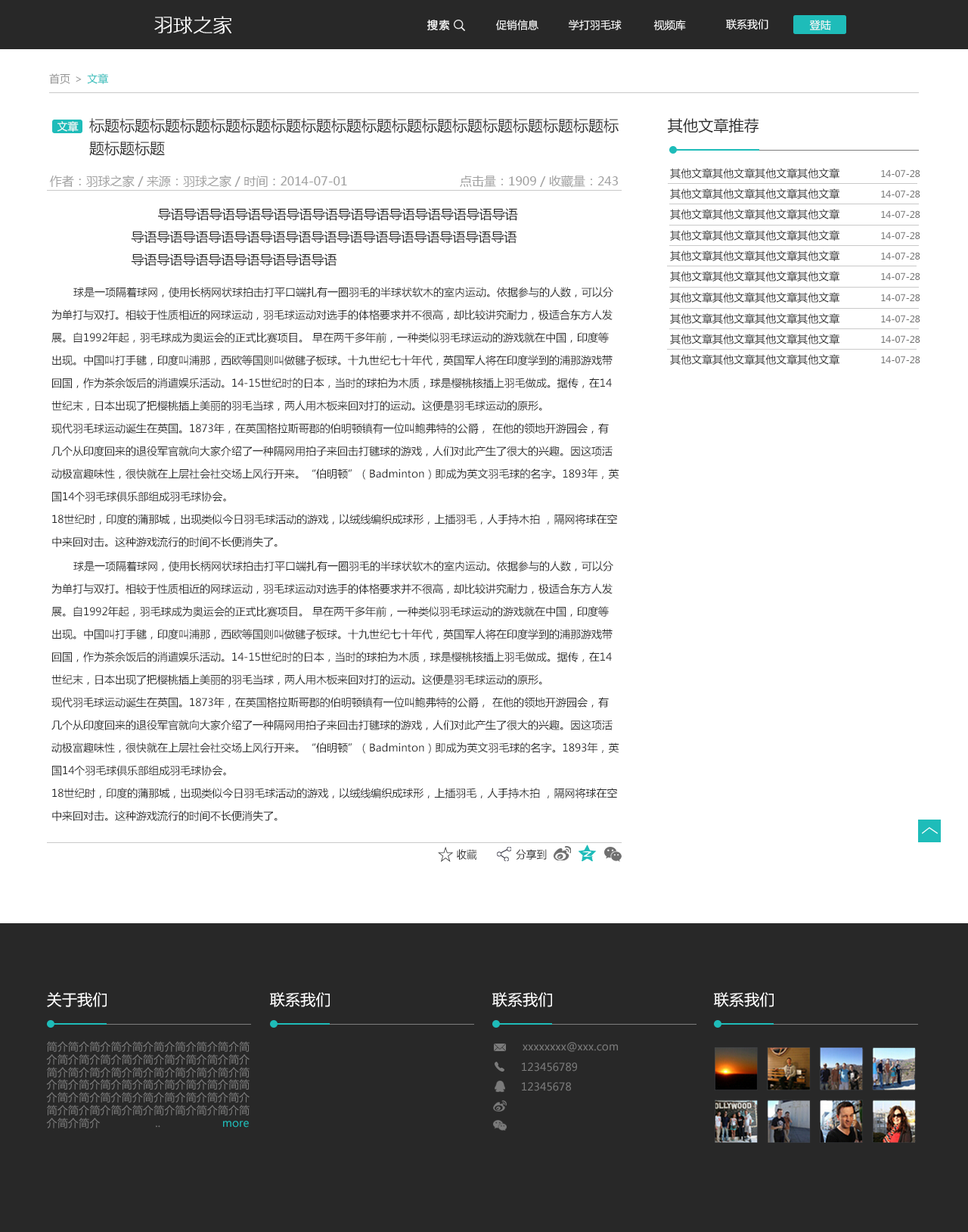
<style>
.page{position:relative;width:968px;height:1232px;background:#ffffff}
.page>*{position:absolute;margin:0}
.t1{font:18.9px "huxiaobo-meixin";color:#ffffff;font-weight:bold}
.t2{font:10.6px "MicrosoftYaHei";letter-spacing:0.1em;color:#ffffff}
.t3{font:10.6px "MicrosoftYaHei";color:#ffffff}
.t4{font:10.6px "MicrosoftYaHei";color:#919191}
.t5{font:10.6px "MicrosoftYaHei";color:#1ebcb9}
.t6{font:15.1px/22.7px "MicrosoftYaHei";color:#282828}
.t7{font:15.1px "MicrosoftYaHei";letter-spacing:0.01em;color:#282828}
.t8{font:10.6px "MicrosoftYaHei";color:#282828}
.t9{font:9.1px "MicrosoftYaHei";color:#282828}
.t10{font:12.1px "MicrosoftYaHei";color:#a0a0a0}
.t11{font:12.9px/22.7px "MicrosoftYaHei";color:#282828}
.t12{font:10.6px/22.7px "MicrosoftYaHei";color:#282828}
.t13{font:10.7px "MicrosoftYaHei";color:#282828;scale:0.96 1}
.t14{font:15.1px "MicrosoftYaHei";letter-spacing:0.01em;color:#ffffff}
.t15{font:10.6px "MicrosoftYaHei";letter-spacing:0.01em;color:#7b7b7b}
.t16{font:10.6px "MicrosoftYaHei";letter-spacing:0.01em;color:#1ebcb9}
</style>
<div class="page">
<p class="t1" style="left:154px;top:16px;width:77px;height:18px">羽球之家</p>
<p class="t2" style="left:427px;top:20px;width:23px;height:11px">搜索</p>
<p class="t3" style="left:496px;top:20px;width:43px;height:10px">促销信息</p>
<p class="t3" style="left:569px;top:20px;width:53px;height:10px">学打羽毛球</p>
<p class="t3" style="left:654px;top:20px;width:32px;height:10px">视频库</p>
<p class="t3" style="left:726px;top:19px;width:43px;height:11px">联系我们</p>
<p class="t3" style="left:809px;top:20px;width:22px;height:10px">登陆</p>
<p class="t4" style="left:49px;top:73px;width:59px;height:11px">首页 ＞ <span class="t5">文章</span></p>
<p class="t3" style="left:57px;top:121px;width:22px;height:11px">文章</p>
<p class="t6" style="left:89px;top:118px;width:530px;height:38px">标题标题标题标题标题标题标题标题标题标题标题标题标题标题标题标题标题标<br>题标题标题</p>
<p class="t7" style="left:668px;top:118px;width:91px;height:15px">其他文章推荐</p>
<p class="t8" style="left:670px;top:168px;width:251px;height:11px">其他文章其他文章其他文章其他文章             <span class="t9">14-07-28</span></p>
<p class="t10" style="left:50px;top:175px;width:297px;height:13px">作者：羽球之家 / 来源：羽球之家 / 时间：2014-07-01</p>
<p class="t10" style="left:460px;top:175px;width:158px;height:13px">点击量：1909 / 收藏量：243</p>
<p class="t8" style="left:670px;top:188px;width:251px;height:11px">其他文章其他文章其他文章其他文章             <span class="t9">14-07-28</span></p>
<p class="t11" style="left:131px;top:208px;width:387px;height:58px">导语导语导语导语导语导语导语导语导语导语导语导语导语导语<br>导语导语导语导语导语导语导语导语导语导语导语导语导语导语导语<br>导语导语导语导语导语导语导语导语</p>
<p class="t8" style="left:670px;top:209px;width:251px;height:10px">其他文章其他文章其他文章其他文章             <span class="t9">14-07-28</span></p>
<p class="t8" style="left:670px;top:230px;width:251px;height:11px">其他文章其他文章其他文章其他文章             <span class="t9">14-07-28</span></p>
<p class="t8" style="left:670px;top:250px;width:251px;height:11px">其他文章其他文章其他文章其他文章             <span class="t9">14-07-28</span></p>
<p class="t8" style="left:670px;top:271px;width:251px;height:10px">其他文章其他文章其他文章其他文章             <span class="t9">14-07-28</span></p>
<p class="t12" style="left:51px;top:287px;width:569px;height:260px">球是一项隔着球网，使用长柄网状球拍击打平口端扎有一圈羽毛的半球状软木的室内运动。依据参与的人数，可以分<br>为单打与双打。相较于性质相近的网球运动，羽毛球运动对选手的体格要求并不很高，却比较讲究耐力，极适合东方人发<br>展。自1992年起，羽毛球成为奥运会的正式比赛项目。 早在两千多年前，一种类似羽毛球运动的游戏就在中国，印度等<br>出现。中国叫打手毽，印度叫浦那，西欧等国则叫做毽子板球。十九世纪七十年代，英国军人将在印度学到的浦那游戏带<br>回国，作为茶余饭后的消遣娱乐活动。14-15世纪时的日本，当时的球拍为木质，球是樱桃核插上羽毛做成。据传，在14<br>世纪末，日本出现了把樱桃插上美丽的羽毛当球，两人用木板来回对打的运动。这便是羽毛球运动的原形。<br>现代羽毛球运动诞生在英国。1873年，在英国格拉斯哥郡的伯明顿镇有一位叫鲍弗特的公爵， 在他的领地开游园会，有<br>几个从印度回来的退役军官就向大家介绍了一种隔网用拍子来回击打毽球的游戏，人们对此产生了很大的兴趣。因这项活<br>动极富趣味性，很快就在上层社会社交场上风行开来。“伯明顿”（Badminton）即成为英文羽毛球的名字。1893年，英<br>国14个羽毛球俱乐部组成羽毛球协会。<br>18世纪时，印度的蒲那城，出现类似今日羽毛球活动的游戏，以绒线编织成球形，上插羽毛，人手持木拍 ，隔网将球在空<br>中来回对击。这种游戏流行的时间不长便消失了。</p>
<p class="t8" style="left:670px;top:292px;width:251px;height:11px">其他文章其他文章其他文章其他文章             <span class="t9">14-07-28</span></p>
<p class="t8" style="left:670px;top:313px;width:251px;height:11px">其他文章其他文章其他文章其他文章             <span class="t9">14-07-28</span></p>
<p class="t8" style="left:670px;top:334px;width:251px;height:10px">其他文章其他文章其他文章其他文章             <span class="t9">14-07-28</span></p>
<p class="t8" style="left:670px;top:354px;width:251px;height:11px">其他文章其他文章其他文章其他文章             <span class="t9">14-07-28</span></p>
<p class="t12" style="left:51px;top:561px;width:569px;height:260px">球是一项隔着球网，使用长柄网状球拍击打平口端扎有一圈羽毛的半球状软木的室内运动。依据参与的人数，可以分<br>为单打与双打。相较于性质相近的网球运动，羽毛球运动对选手的体格要求并不很高，却比较讲究耐力，极适合东方人发<br>展。自1992年起，羽毛球成为奥运会的正式比赛项目。 早在两千多年前，一种类似羽毛球运动的游戏就在中国，印度等<br>出现。中国叫打手毽，印度叫浦那，西欧等国则叫做毽子板球。十九世纪七十年代，英国军人将在印度学到的浦那游戏带<br>回国，作为茶余饭后的消遣娱乐活动。14-15世纪时的日本，当时的球拍为木质，球是樱桃核插上羽毛做成。据传，在14<br>世纪末，日本出现了把樱桃插上美丽的羽毛当球，两人用木板来回对打的运动。这便是羽毛球运动的原形。<br>现代羽毛球运动诞生在英国。1873年，在英国格拉斯哥郡的伯明顿镇有一位叫鲍弗特的公爵， 在他的领地开游园会，有<br>几个从印度回来的退役军官就向大家介绍了一种隔网用拍子来回击打毽球的游戏，人们对此产生了很大的兴趣。因这项活<br>动极富趣味性，很快就在上层社会社交场上风行开来。“伯明顿”（Badminton）即成为英文羽毛球的名字。1893年，英<br>国14个羽毛球俱乐部组成羽毛球协会。<br>18世纪时，印度的蒲那城，出现类似今日羽毛球活动的游戏，以绒线编织成球形，上插羽毛，人手持木拍 ，隔网将球在空<br>中来回对击。这种游戏流行的时间不长便消失了。</p>
<p class="t13" style="left:457px;top:849px;width:20px;height:10px">收藏</p>
<p class="t13" style="left:516px;top:849px;width:31px;height:10px">分享到</p>
<p class="t14" style="left:47px;top:992px;width:60px;height:15px">关于我们</p>
<p class="t14" style="left:270px;top:992px;width:60px;height:15px">联系我们</p>
<p class="t14" style="left:492px;top:992px;width:60px;height:15px">联系我们</p>
<p class="t14" style="left:714px;top:992px;width:60px;height:15px">联系我们</p>
<p class="t15" style="left:46px;top:1041px;width:204px;height:87px">简介简介简介简介简介简介简介简介简介简<br>介简介简介简介简介简介简介简介简介简介<br>简介简介简介简介简介简介简介简介简介简<br>介简介简介简介简介简介简介简介简介简简<br>介简介简介简介简介简介简介简介简介简介<br>简介简介简介简介简介简介简介简介简介简<br>介简介简介                 ..                   <span class="t16">more</span></p>
<p class="t15" style="left:523px;top:1042px;width:95px;height:9px">xxxxxxxx@xxx.com</p>
<p class="t15" style="left:522px;top:1062px;width:55px;height:9px">123456789</p>
<p class="t15" style="left:522px;top:1082px;width:49px;height:9px">12345678</p>
</div>
